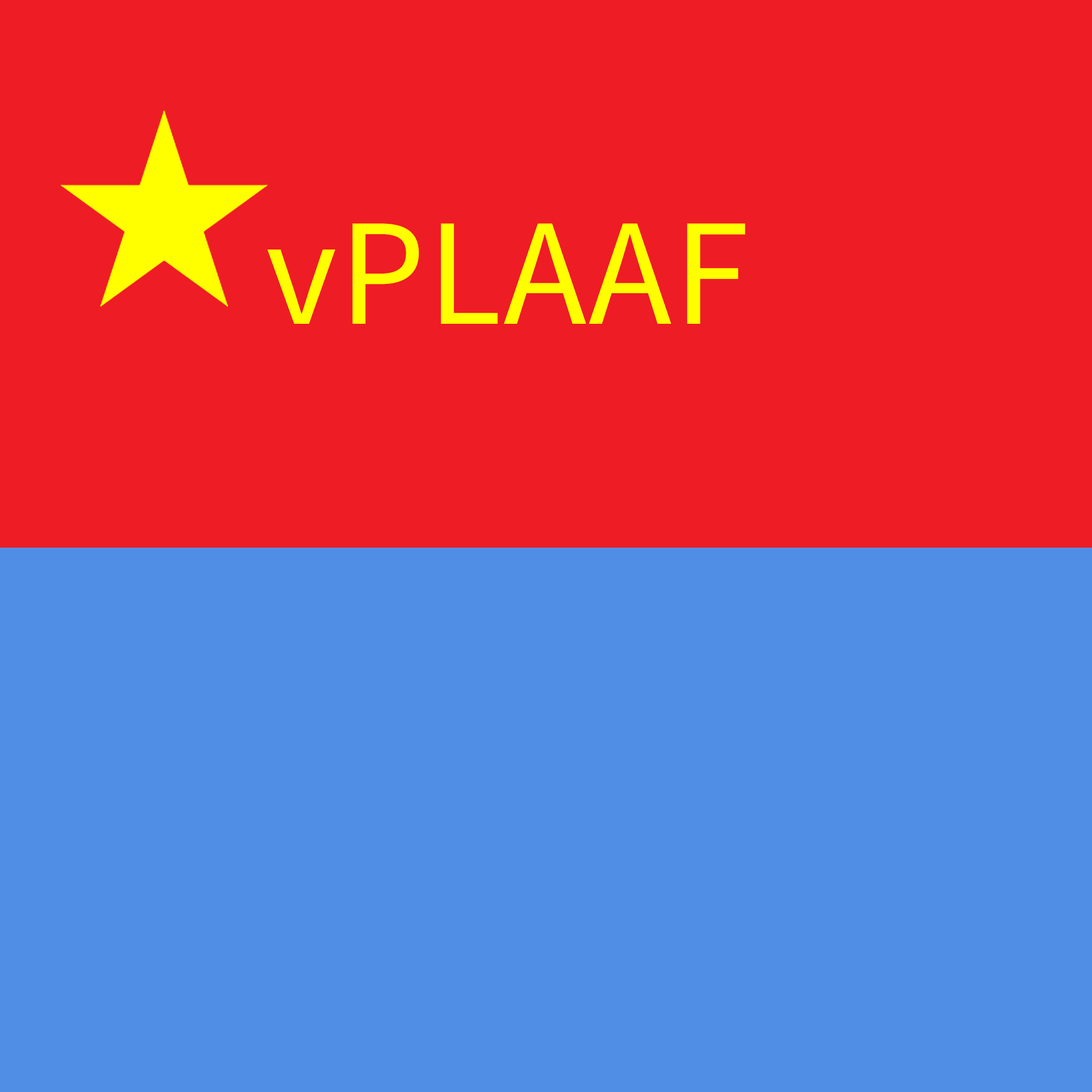
<style>
.page{position:relative;width:1092px;height:1092px;background:#508ee6}
.page>*{position:absolute;margin:0}
.t1{font:136.5px "SourceHanSansSCVF-Regular";letter-spacing:0.015em;color:#ffff00}
</style>
<div class="page">
<p class="t1" style="left:268px;top:223px;width:477px;height:101px">vPLAAF</p>
</div>
